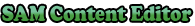
<style>
.page{position:relative;width:195px;height:26px;background:#ffffff}
.page>*{position:absolute;margin:0}
.t1{font:22px "CooperBlack";scale:0.84 1}
</style>
<div class="page">
<p class="t1" style="left:2px;top:5px;width:190px;height:16px">SAM Content Editor</p>
</div>
